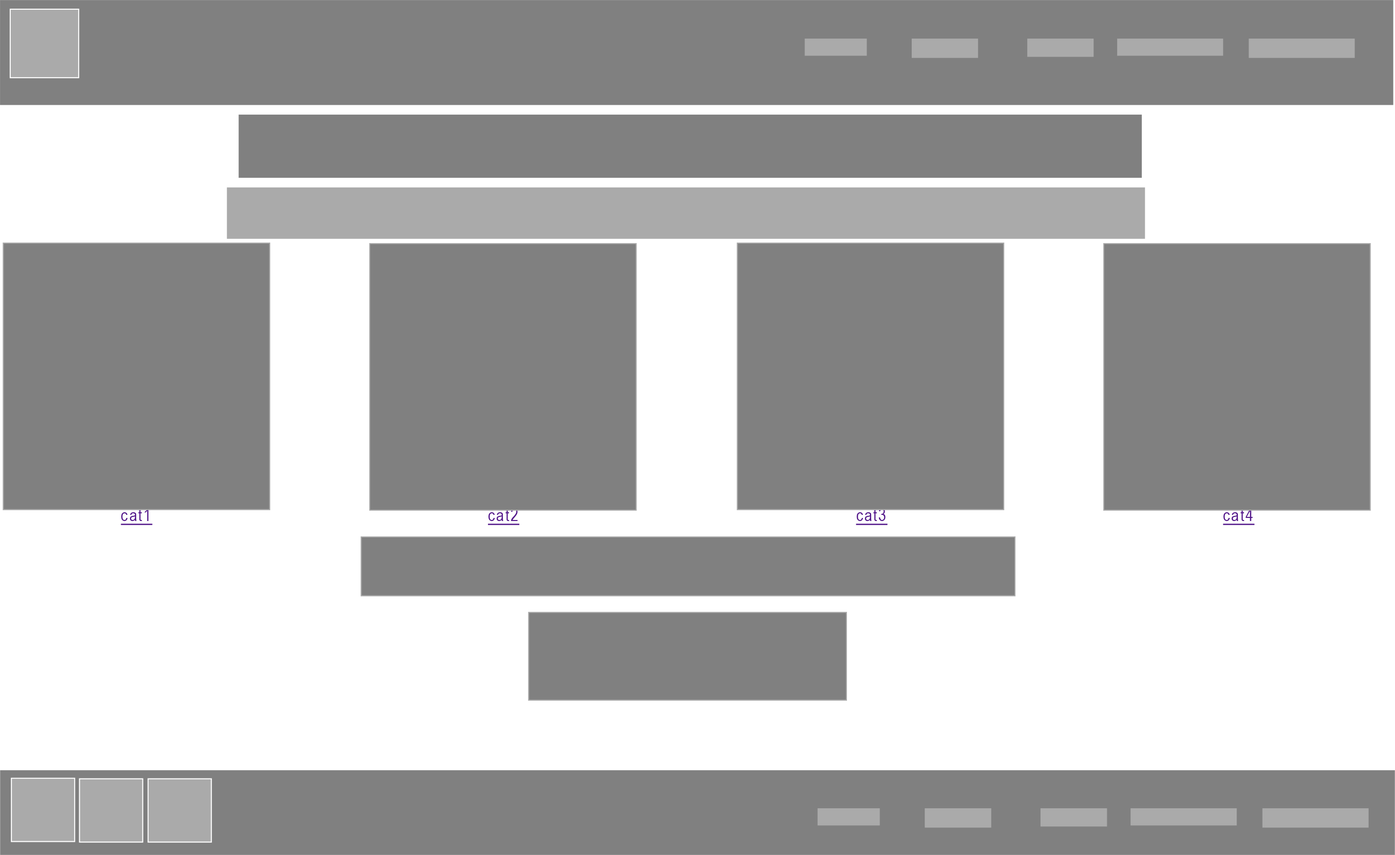
<style>
.page{position:relative;width:1395px;height:855px;background:#808080}
.page>*{position:absolute;margin:0}
.t1{font:17.1px "ArialNarrow";letter-spacing:0.07em;color:#551a8b;text-decoration:underline}
</style>
<div class="page">
<p class="t1" style="left:121px;top:508px;width:32px;height:17px">cat1</p>
<p class="t1" style="left:488px;top:508px;width:32px;height:17px">cat2</p>
<p class="t1" style="left:856px;top:508px;width:32px;height:17px">cat3</p>
<p class="t1" style="left:1223px;top:508px;width:32px;height:17px">cat4</p>
</div>
